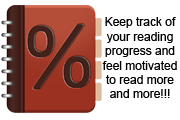
<style>
.page{position:relative;width:180px;height:120px;background:#ffffff}
.page>*{position:absolute;margin:0}
.t1{font:12px "ArialMT";color:#000000}
</style>
<div class="page">
<p class="t1" style="left:102px;top:17px;width:75px;height:81px;text-align:center">Keep track of<br>your reading<br>progress and<br>feel motivated<br>to read more<br>and more!!!</p>
</div>
